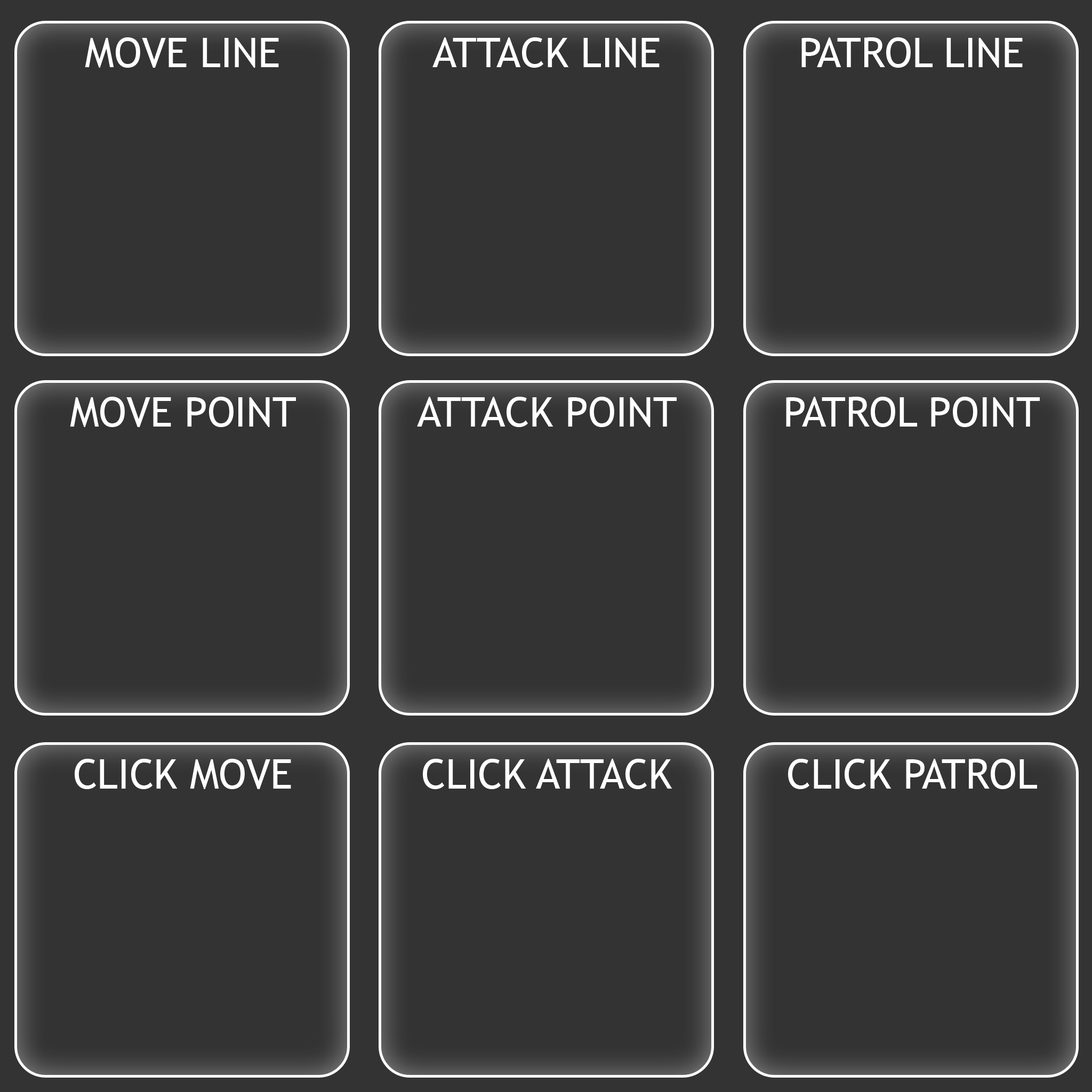
<style>
.page{position:relative;width:1092px;height:1092px;background:#333333}
.page>*{position:absolute;margin:0}
.t1{font:40.9px "TrebuchetMS";color:#ffffff}
</style>
<div class="page">
<p class="t1" style="left:85px;top:37px;width:194px;height:31px">MOVE LINE</p>
<p class="t1" style="left:432px;top:37px;width:228px;height:31px">ATTACK LINE</p>
<p class="t1" style="left:801px;top:37px;width:222px;height:31px">PATROL LINE</p>
<p class="t1" style="left:70px;top:397px;width:226px;height:30px">MOVE POINT</p>
<p class="t1" style="left:417px;top:397px;width:260px;height:30px">ATTACK POINT</p>
<p class="t1" style="left:786px;top:397px;width:254px;height:30px">PATROL POINT</p>
<p class="t1" style="left:75px;top:759px;width:216px;height:30px">CLICK MOVE</p>
<p class="t1" style="left:423px;top:759px;width:249px;height:30px">CLICK ATTACK</p>
<p class="t1" style="left:788px;top:759px;width:249px;height:30px">CLICK PATROL</p>
</div>
